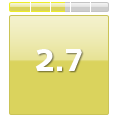
<style>
.page{position:relative;width:117px;height:117px;background:#dad35d}
.page>*{position:absolute;margin:0}
.t1{font:36px "Colaborate-Bold";color:#ffffff;text-transform:uppercase}
</style>
<div class="page">
<p class="t1" style="left:35px;top:49px;width:47px;height:22px">2.7</p>
</div>
